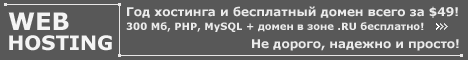
<style>
.page{position:relative;width:468px;height:60px;background:#585858}
.page>*{position:absolute;margin:0}
.t1{font:12px "Verdana-Bold";color:#ebebeb}
.t2{font:24px "Verdana-Bold";color:#f4f4f4}
.t3{font:10px "Verdana-Bold";color:#ebebeb}
.t4{font:20px "Verdana-Bold";color:#f4f4f4}
</style>
<div class="page">
<p class="t1" style="left:127px;top:6px;width:331px;height:12px">Год хостинга и бесплатный домен всего за $49!</p>
<p class="t2" style="left:8px;top:12px;width:61px;height:18px">WEB</p>
<p class="t3" style="left:126px;top:22px;width:298px;height:10px">300 Мб, PHP, MySQL + домен в зоне .RU бесплатно!</p>
<p class="t4" style="left:9px;top:35px;width:103px;height:16px">HOSTING</p>
<p class="t1" style="left:252px;top:39px;width:207px;height:12px">Не дорого, надежно и просто!</p>
</div>
